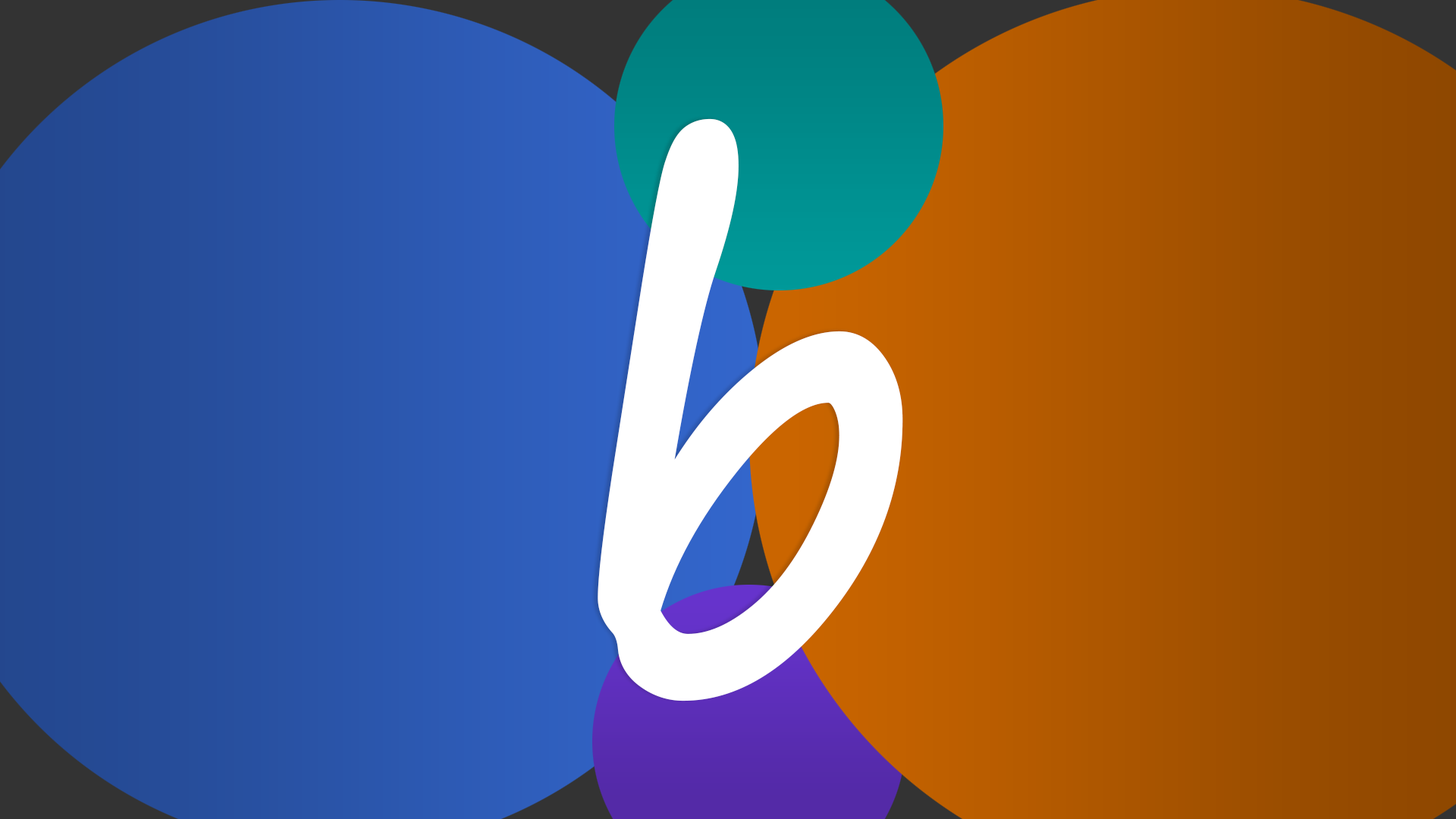
<style>
.page{position:relative;width:1456px;height:819px}
.page>*{position:absolute;margin:0}
.t1{font:650.6px "SegoePrint";color:#ffffff;font-weight:bold;scale:0.91 1}
</style>
<div class="page">
<p class="t1" style="left:598px;top:118px;width:305px;height:583px">b</p>
</div>
